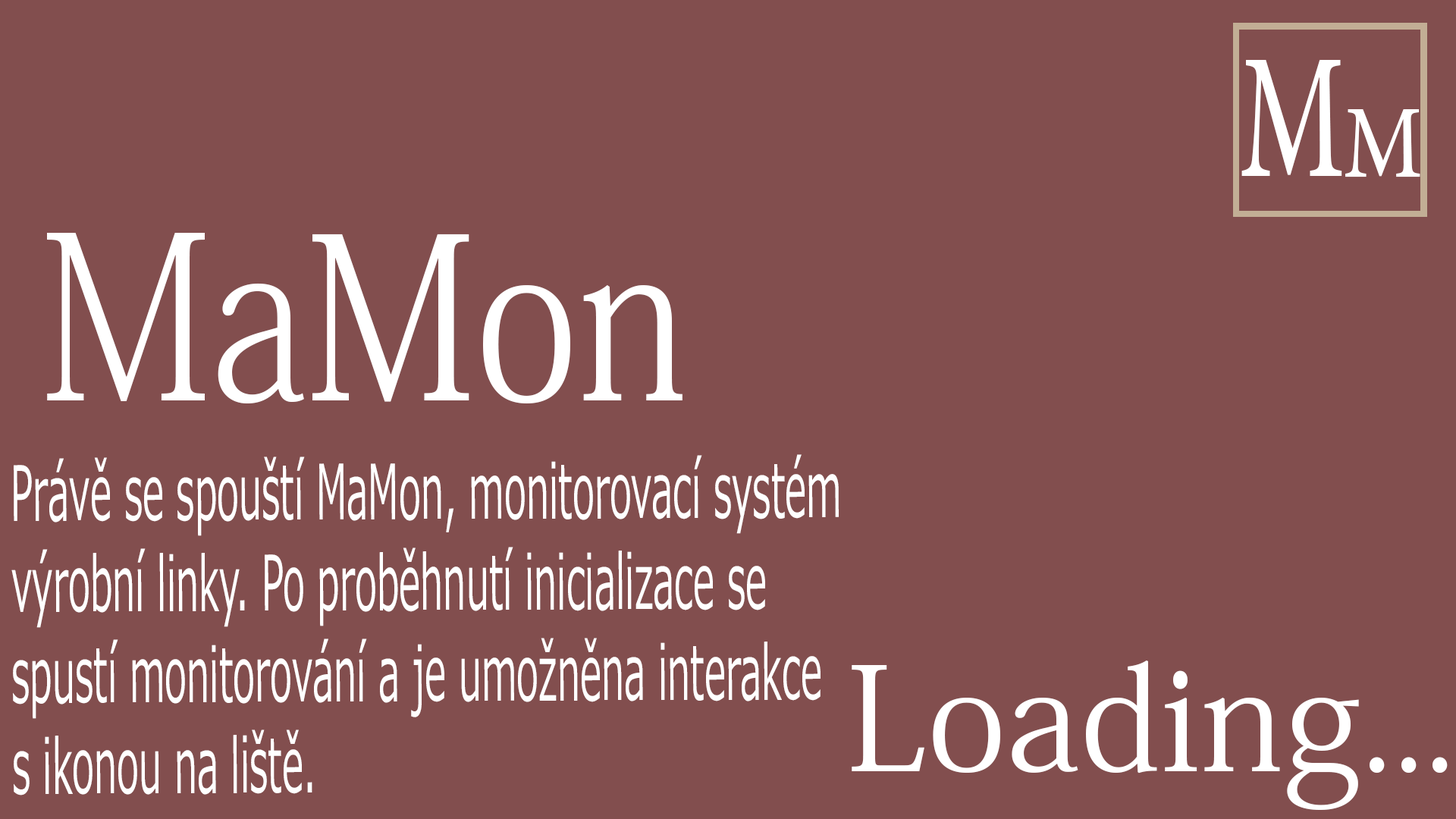
<style>
.page{position:relative;width:1456px;height:819px;background:#824e4e}
.page>*{position:absolute;margin:0}
.t1{font:176.3px "AdobeHebrew-Regular";color:#ffffff;scale:0.66 1}
.t2{font:101.9px "AdobeHebrew-Regular";color:#ffffff;scale:0.85 1}
.t3{font:224.2px "AdobeKaitiStd-Regular";color:#ffffff;scale:0.83 1}
.t4{font:227.5px "AdobeFangsongStd-Regular";color:#ffffff;scale:0.83 1}
.t5{font:75.8px "Meiryo";color:#ffffff;scale:0.49 1}
.t6{font:143.3px "AdobeKaitiStd-Regular";color:#ffffff}
</style>
<div class="page">
<p class="t1" style="left:1241px;top:60px;width:101px;height:116px">M</p>
<p class="t2" style="left:1345px;top:109px;width:75px;height:68px">M</p>
<p class="t3" style="left:47px;top:233px;width:635px;height:171px"><span class="t4">Ma</span>Mon</p>
<p class="t5" style="left:11px;top:454px;width:828px;height:341px">Právě se spouští MaMon, monitorovací systém výrobní linky. Po proběhnutí inicializace se spustí monitorování a je umožněna interakce s ikonou na liště.</p>
<p class="t6" style="left:852px;top:660px;width:596px;height:150px">Loading...</p>
</div>
